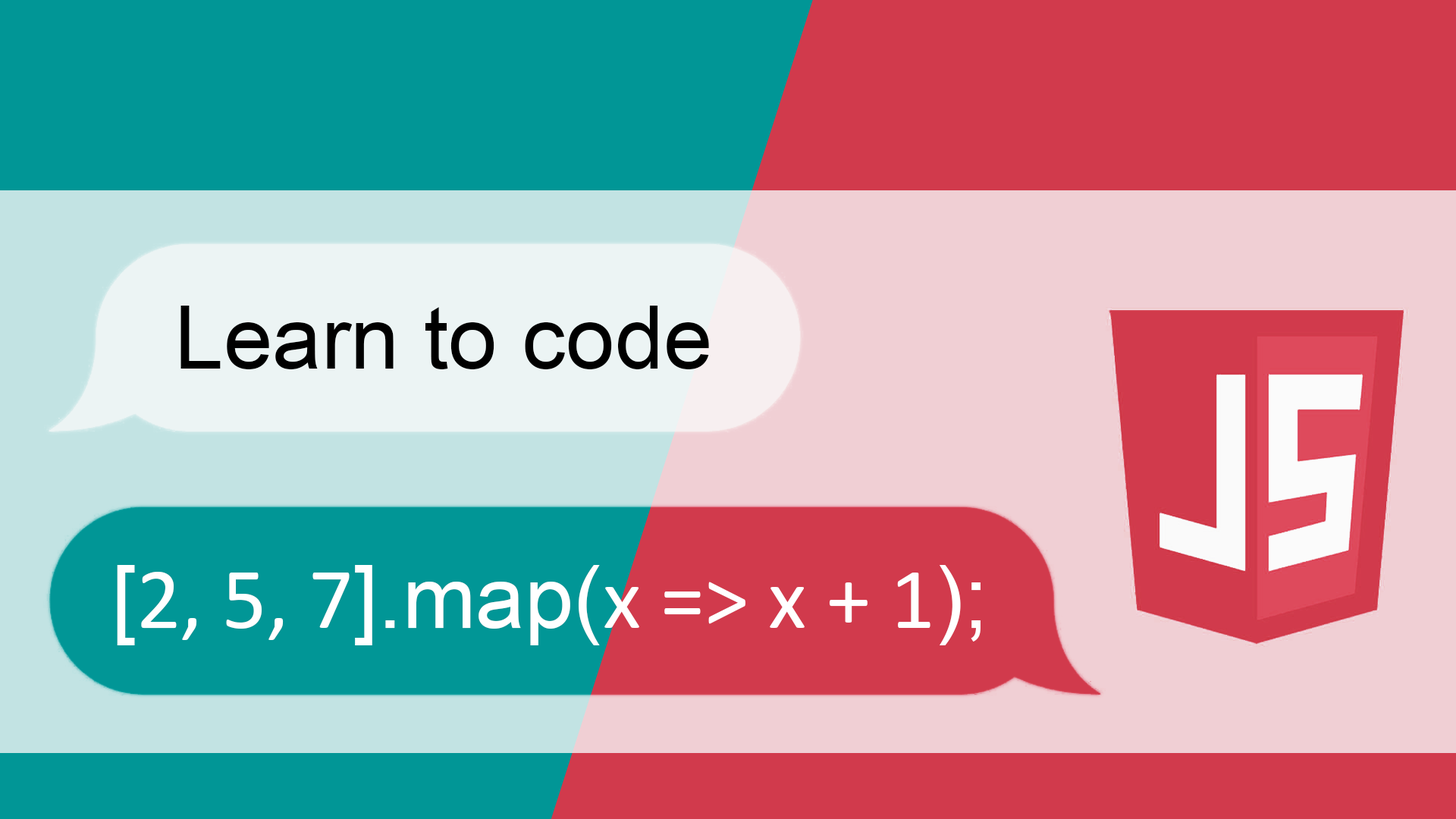
<style>
.page{position:relative;width:1456px;height:819px;background:#d13a4c}
.page>*{position:absolute;margin:0}
.t1{font:88px "ArialMT";color:#000000}
.t2{font:88px "Calibri";color:#ffffff}
.t3{font:88px "ArialMT";color:#ffffff}
</style>
<div class="page">
<p class="t1" style="left:180px;top:306px;width:529px;height:63px">Learn to code</p>
<p class="t2" style="left:117px;top:565px;width:864px;height:80px"><span class="t3">[</span>2, 5, 7<span class="t3">].map(</span>x =&gt; x + 1<span class="t3">);</span></p>
</div>
